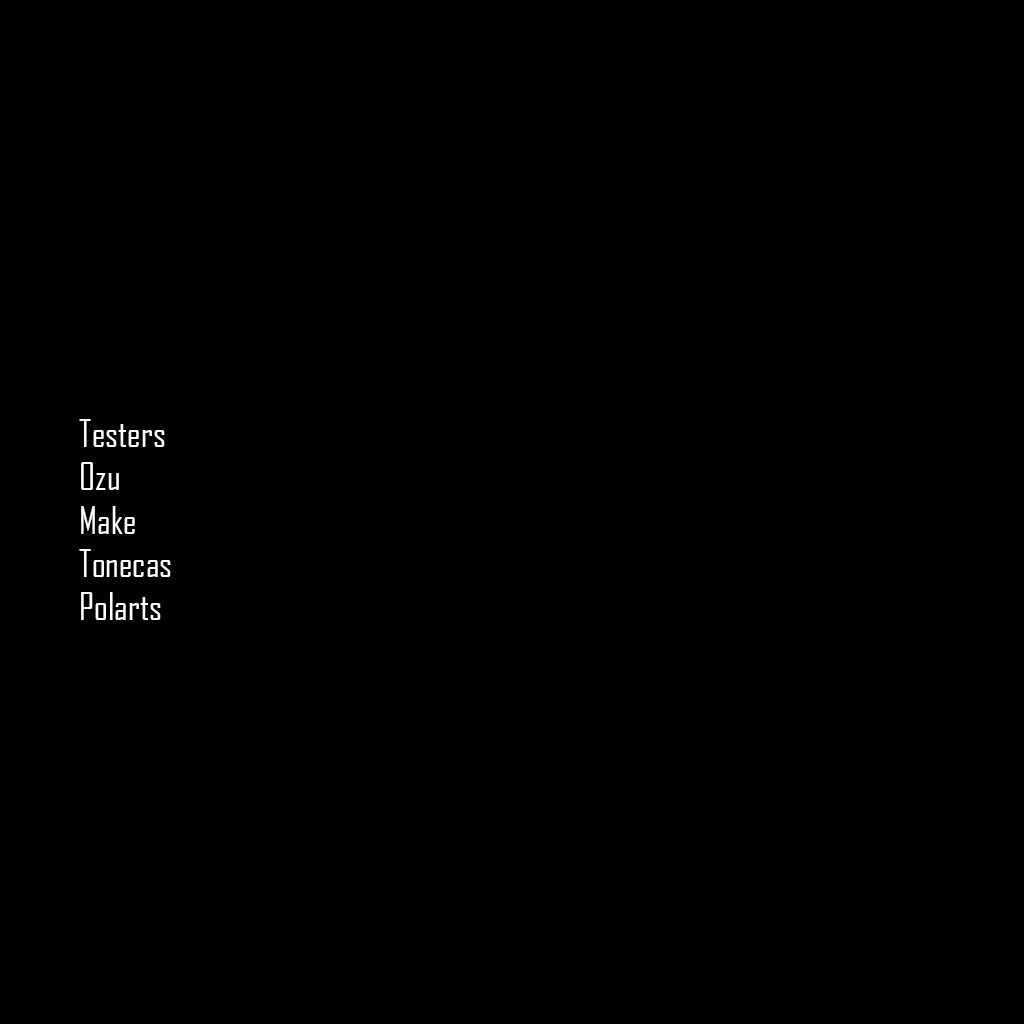
<style>
.page{position:relative;width:1024px;height:1024px;background:#000000}
.page>*{position:absolute;margin:0}
.t1{font:36px "AgencyFBCyrillic";color:#ffffff}
</style>
<div class="page">
<p class="t1" style="left:79px;top:419px;width:92px;height:201px">Testers<br>Ozu<br>Make<br>Tonecas<br>Polarts</p>
</div>
